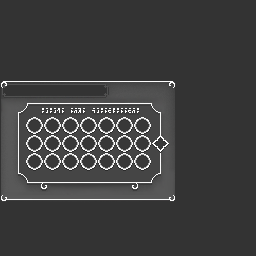
<style>
.page{position:relative;width:256px;height:256px;background:#333333}
.page>*{position:absolute;margin:0}
.t1{font:10.3px "AncientHylian-English";letter-spacing:0.075em;color:#ffffff;font-variant:small-caps}
</style>
<div class="page">
<p class="t1" style="left:42px;top:108px;width:97px;height:5px">select your destibnation</p>
</div>
